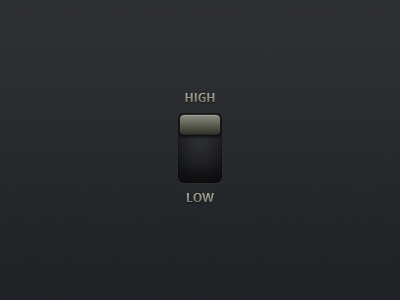
<style>
.page{position:relative;width:400px;height:300px}
.page>*{position:absolute;margin:0}
.t1{font:12px "OpenSans-Bold";color:#909283;text-transform:uppercase}
.t2{font:12px "OpenSans-Bold";color:#888a7b;text-transform:uppercase}
</style>
<div class="page">
<p class="t1" style="left:185px;top:93px;width:30px;height:9px">HIGH</p>
<p class="t2" style="left:186px;top:193px;width:28px;height:9px">LOW</p>
</div>
